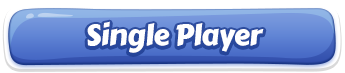
<style>
.page{position:relative;width:345px;height:73px;background:#ffffff}
.page>*{position:absolute;margin:0}
.t1{font:29.2px "CarterOne";letter-spacing:-0.02em;color:#ffffff}
</style>
<div class="page">
<p class="t1" style="left:87px;top:21px;width:177px;height:32px">Single Player</p>
</div>
